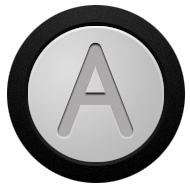
<style>
.page{position:relative;width:190px;height:190px;background:#ffffff}
.page>*{position:absolute;margin:0}
.t1{font:120px "Comfortaa-Bold";color:#acaaaa}
</style>
<div class="page">
<p class="t1" style="left:57px;top:42px;width:77px;height:95px">A</p>
</div>
